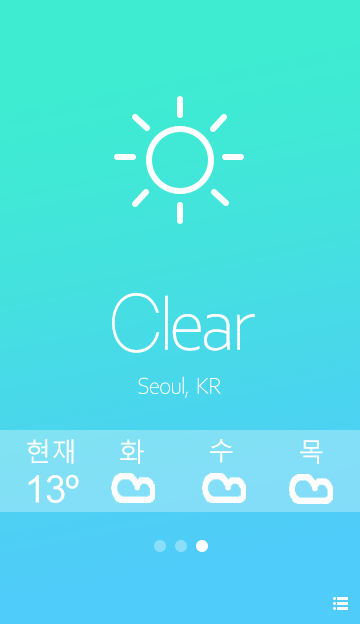
<style>
.page{position:relative;width:360px;height:624px}
.page>*{position:absolute;margin:0}
.t1{font:72.8px "GmarketSansLight";letter-spacing:-0.075em;color:#ffffff;scale:0.82 1}
.t2{font:76.4px "CorbelLight";letter-spacing:-0.075em;color:#ffffff}
.t3{font:24px "CorbelLight";letter-spacing:-0.05em;color:#ffffff}
.t4{font:26px "MalgunGothic";letter-spacing:-0.01em;color:#ffffff}
.t5{font:38px "ArialMT";letter-spacing:-0.025em;color:#ffffff}
</style>
<div class="page">
<p class="t1" style="left:112px;top:292px;width:48px;height:61px">C</p>
<p class="t2" style="left:165px;top:295px;width:90px;height:56px">lear</p>
<p class="t3" style="left:138px;top:376px;width:83px;height:22px">Seoul,  KR</p>
<p class="t4" style="left:27px;top:439px;width:47px;height:25px">현재</p>
<p class="t4" style="left:120px;top:439px;width:24px;height:25px">화</p>
<p class="t4" style="left:210px;top:439px;width:23px;height:24px">수</p>
<p class="t4" style="left:300px;top:440px;width:23px;height:24px">목</p>
<p class="t5" style="left:28px;top:474px;width:51px;height:29px">13º</p>
</div>
